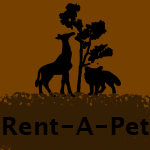
<style>
.page{position:relative;width:150px;height:150px;background:#754000}
.page>*{position:absolute;margin:0}
.t1{font:25px "LucidaGrande-Bold";color:#000000}
</style>
<div class="page">
<p class="t1" style="left:3px;top:117px;width:146px;height:18px">Rent-A-Pet</p>
</div>
